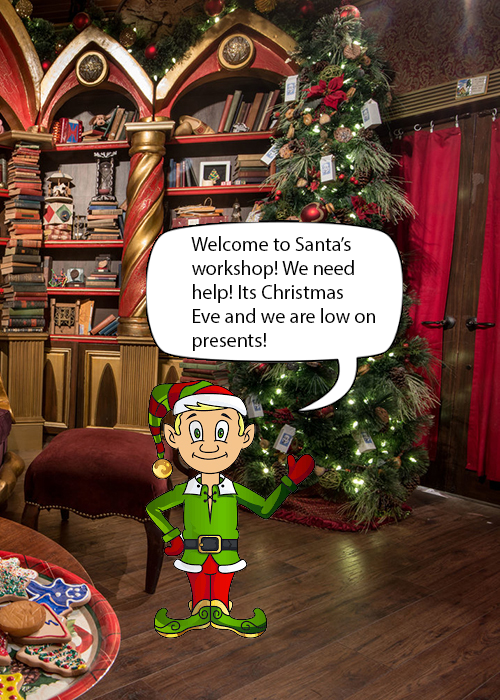
<style>
.page{position:relative;width:500px;height:700px}
.page>*{position:absolute;margin:0}
.t1{font:20px "MyriadPro-Regular";color:#000000}
</style>
<div class="page">
<p class="t1" style="left:191px;top:236px;width:184px;height:115px">Welcome to Santa’s<br>workshop! We need <br>help! Its Christmas <br>Eve and we are low on<br>presents!</p>
</div>
